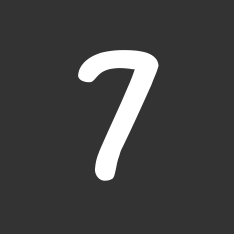
<style>
.page{position:relative;width:234px;height:234px;background:#333333}
.page>*{position:absolute;margin:0}
.t1{font:200px "ActionMan";color:#ffffff}
</style>
<div class="page">
<p class="t1" style="left:78px;top:50px;width:81px;height:131px">7</p>
</div>
